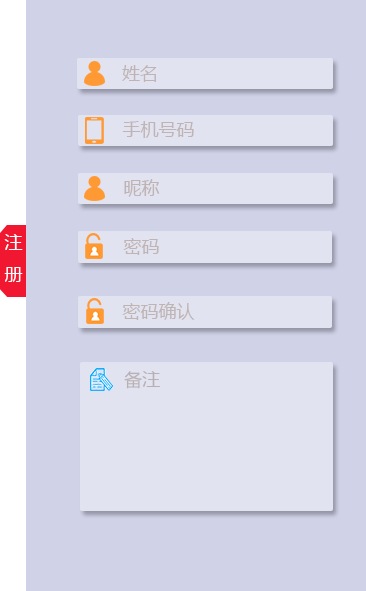
<style>
.page{position:relative;width:366px;height:591px;background:#d0d2e8}
.page>*{position:absolute;margin:0}
.t1{font:18px "MicrosoftYaHei";color:#bfb3b3}
.t2{font:18px "MicrosoftYaHei";color:#ffffff}
.t3{font:18px "MicrosoftYaHei";color:#b9b0b3}
</style>
<div class="page">
<p class="t1" style="left:122px;top:65px;width:35px;height:17px">姓名</p>
<p class="t1" style="left:122px;top:121px;width:72px;height:17px">手机号码</p>
<p class="t1" style="left:124px;top:179px;width:36px;height:18px">昵称</p>
<p class="t2" style="left:4px;top:234px;width:19px;height:48px;text-align:center">注<br>册</p>
<p class="t1" style="left:123px;top:238px;width:36px;height:17px">密码</p>
<p class="t1" style="left:122px;top:302px;width:73px;height:18px">密码确认</p>
<p class="t3" style="left:124px;top:371px;width:36px;height:18px">备注</p>
</div>
